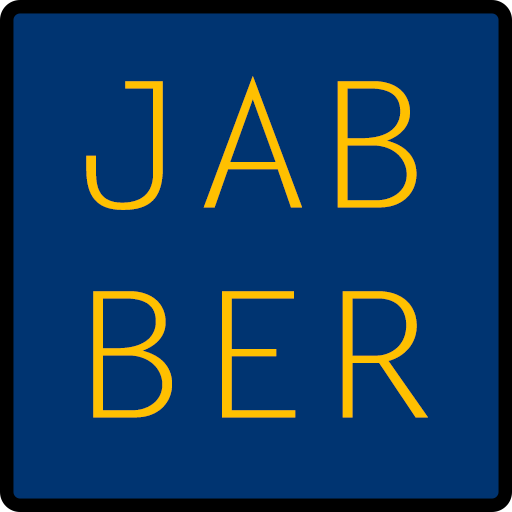
<style>
.page{position:relative;width:512px;height:512px;background:#003471}
.page>*{position:absolute;margin:0}
.t1{font:175px "LetterGothicStd";color:#ffc000;scale:1.16 1}
</style>
<div class="page">
<p class="t1" style="left:86px;top:76px;width:342px;height:342px;text-align:center">JAB<br>BER</p>
</div>
